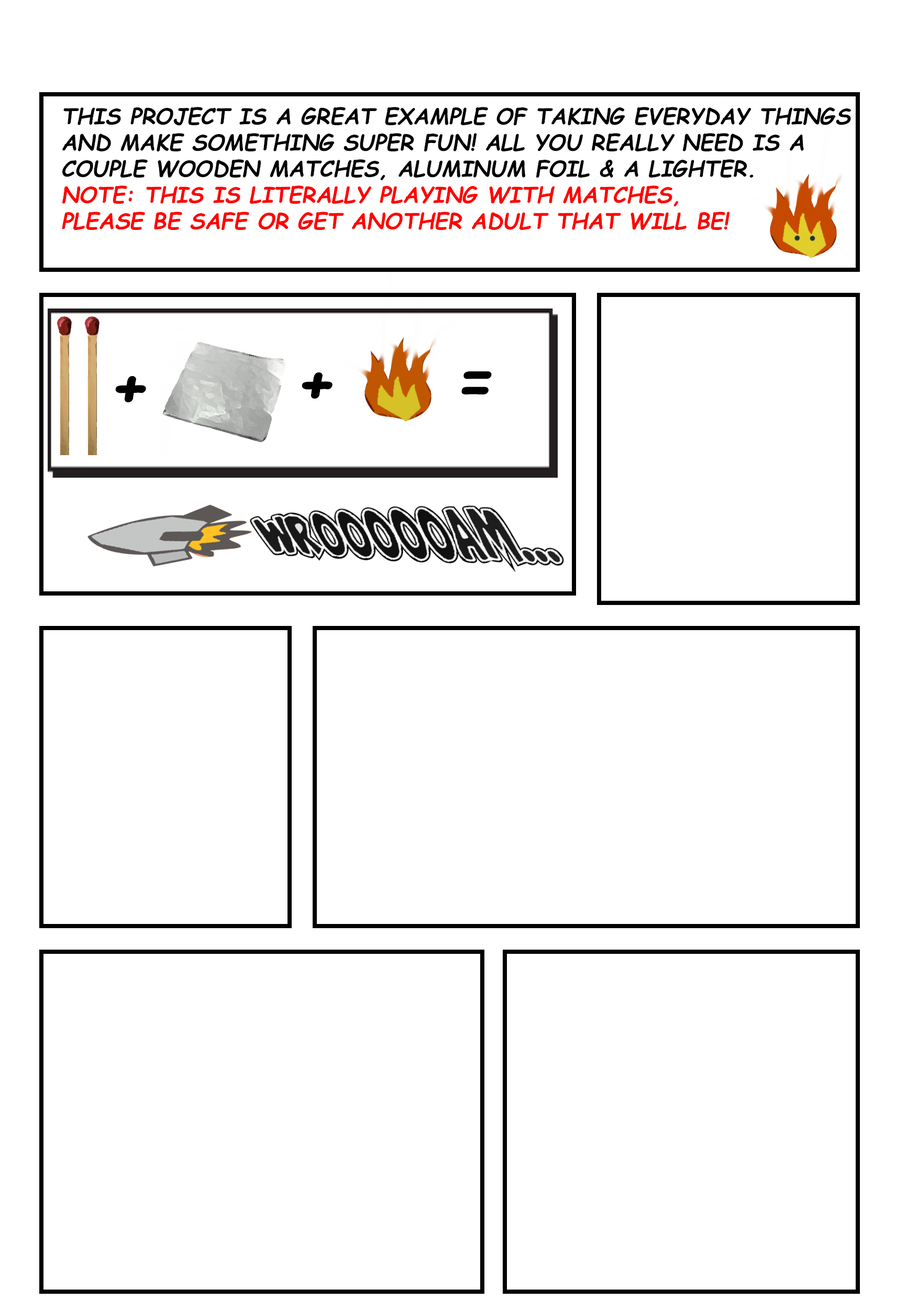
<style>
.page{position:relative;width:918px;height:1299px;background:#ffffff}
.page>*{position:absolute;margin:0}
.t1{font:21.8px "ComicSansMS-BoldItalic";color:#000000}
.t2{font:21.8px "ComicSansMS-BoldItalic";color:#fe0202}
.t3{font:65.5px "ComicSansMS-BoldItalic";color:#000000}
</style>
<div class="page">
<p class="t1" style="left:62px;top:107px;width:789px;height:123px">THIS PROJECT IS A GREAT EXAMPLE OF TAKING EVERYDAY THINGS <br>AND MAKE SOMETHING SUPER FUN! ALL YOU REALLY NEED IS A <br>COUPLE WOODEN MATCHES, ALUMINUM FOIL &amp; A LIGHTER. <br><span class="t2">NOTE: THIS IS LITERALLY PLAYING WITH MATCHES, <br>PLEASE BE SAFE OR GET ANOTHER ADULT THAT WILL BE!</span></p>
<p class="t3" style="left:115px;top:376px;width:31px;height:26px">+</p>
<p class="t3" style="left:302px;top:372px;width:31px;height:27px">+</p>
<p class="t3" style="left:461px;top:371px;width:31px;height:23px">=</p>
</div>
